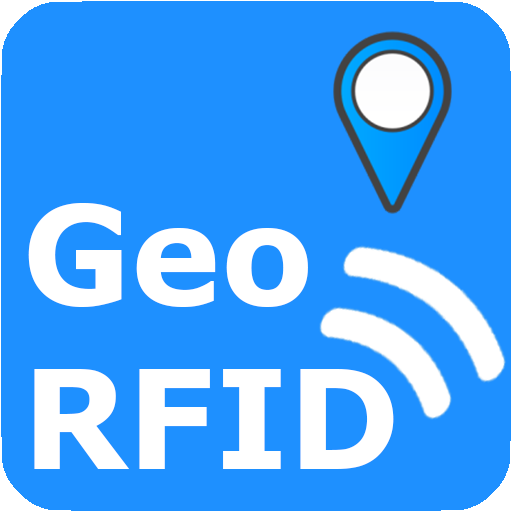
<style>
.page{position:relative;width:512px;height:512px;background:#1e90ff}
.page>*{position:absolute;margin:0}
.t1{font:137.3px "Verdana-Bold";color:#ffffff}
</style>
<div class="page">
<p class="t1" style="left:28px;top:203px;width:366px;height:266px">Geo<br>RFID</p>
</div>
